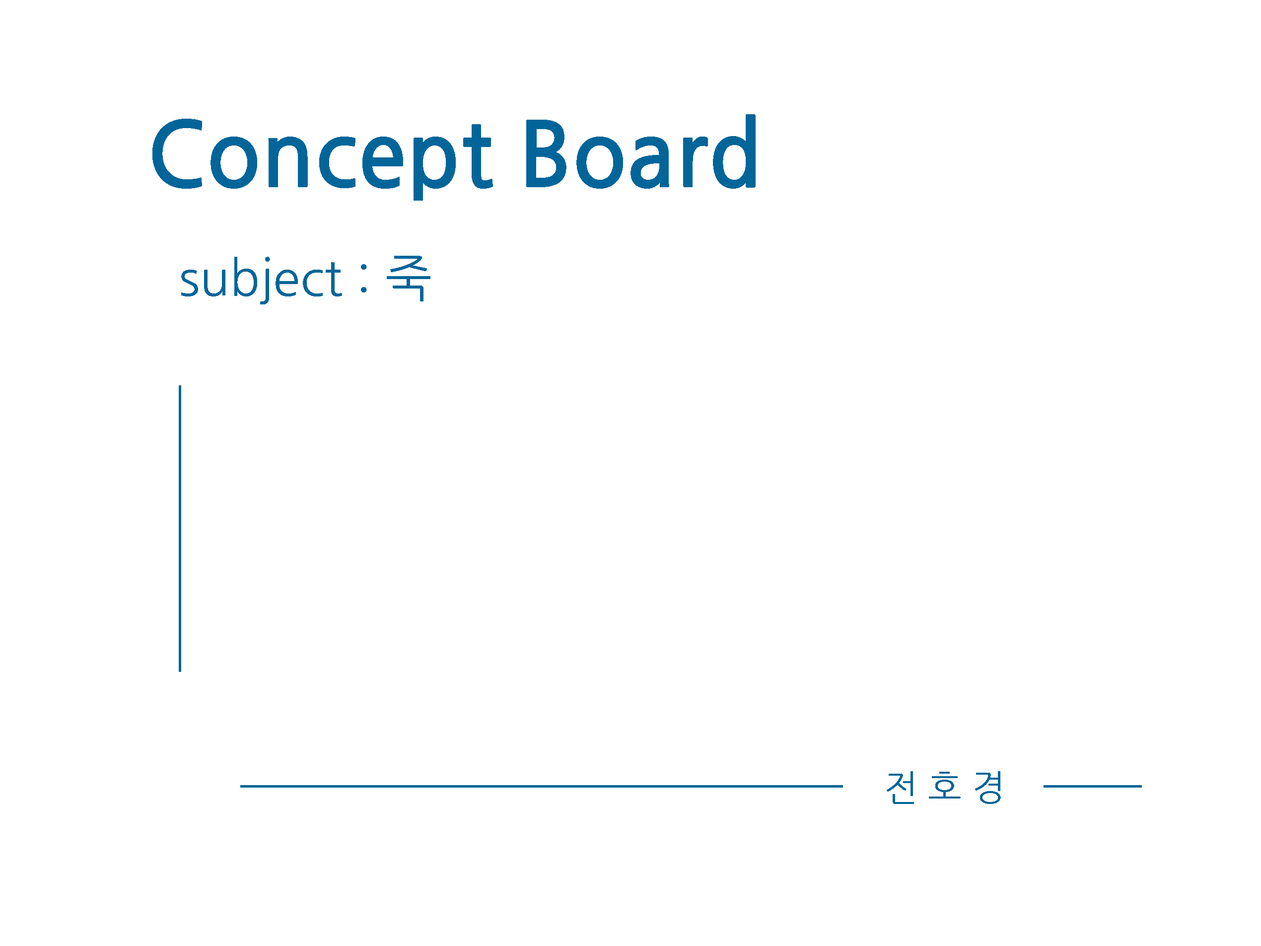
<style>
.page{position:relative;width:1261px;height:946px;background:#ffffff}
.page>*{position:absolute;margin:0}
.t1{font:89.4px "NanumGothic-Bold";color:#016599}
.t2{font:49.6px "NanumGothic";color:#016599}
.t3{font:35.7px "NanumGothic";color:#016599}
</style>
<div class="page">
<p class="t1" style="left:152px;top:114px;width:604px;height:87px">Concept Board</p>
<p class="t2" style="left:181px;top:256px;width:249px;height:48px">subject : 죽</p>
<p class="t3" style="left:887px;top:771px;width:114px;height:33px">전 호 경</p>
</div>
